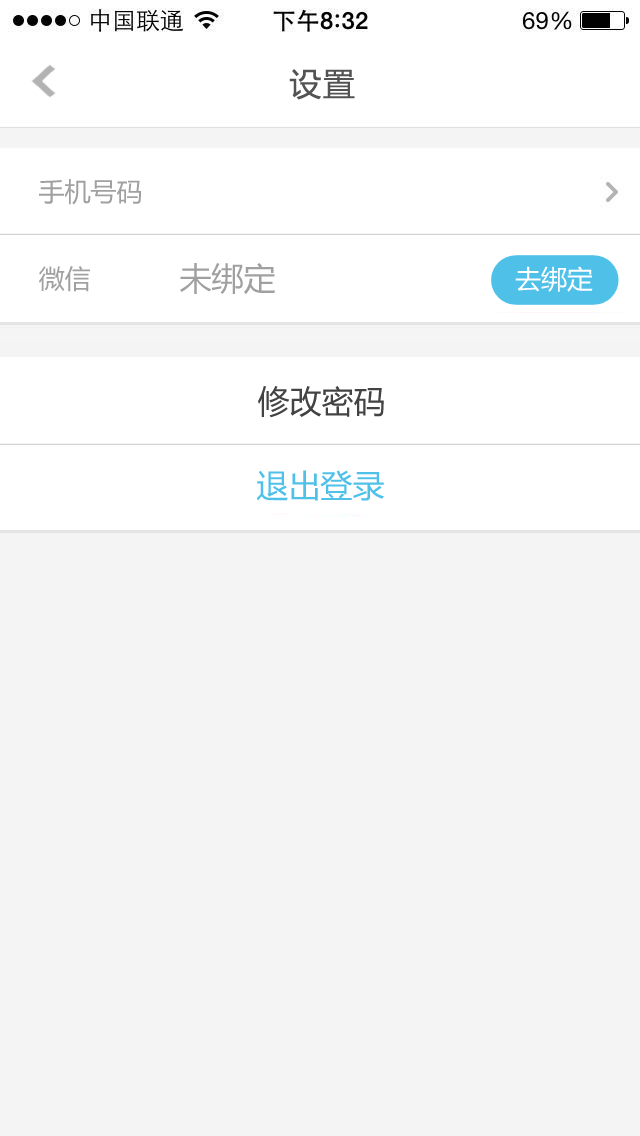
<style>
.page{position:relative;width:640px;height:1136px;background:#f4f4f4}
.page>*{position:absolute;margin:0}
.t1{font:32px "MicrosoftYaHei";letter-spacing:0.05em;color:#545353}
.t2{font:26px "MicrosoftYaHei";color:#a0a0a0}
.t3{font:32px "MicrosoftYaHei";color:#a0a0a0}
.t4{font:26px "MicrosoftYaHei";color:#ffffff}
.t5{font:32px "MicrosoftYaHei";color:#434343}
.t6{font:32px "MicrosoftYaHei";color:#4fc1e9}
</style>
<div class="page">
<p class="t1" style="left:289px;top:69px;width:66px;height:31px">设置</p>
<p class="t2" style="left:39px;top:179px;width:103px;height:26px">手机号码</p>
<p class="t2" style="left:39px;top:266px;width:51px;height:26px">微信</p>
<p class="t3" style="left:180px;top:263px;width:96px;height:32px">未绑定</p>
<p class="t4" style="left:515px;top:266px;width:78px;height:26px">去绑定</p>
<p class="t5" style="left:258px;top:386px;width:126px;height:32px">修改密码</p>
<p class="t6" style="left:256px;top:470px;width:128px;height:31px">退出登录</p>
</div>
